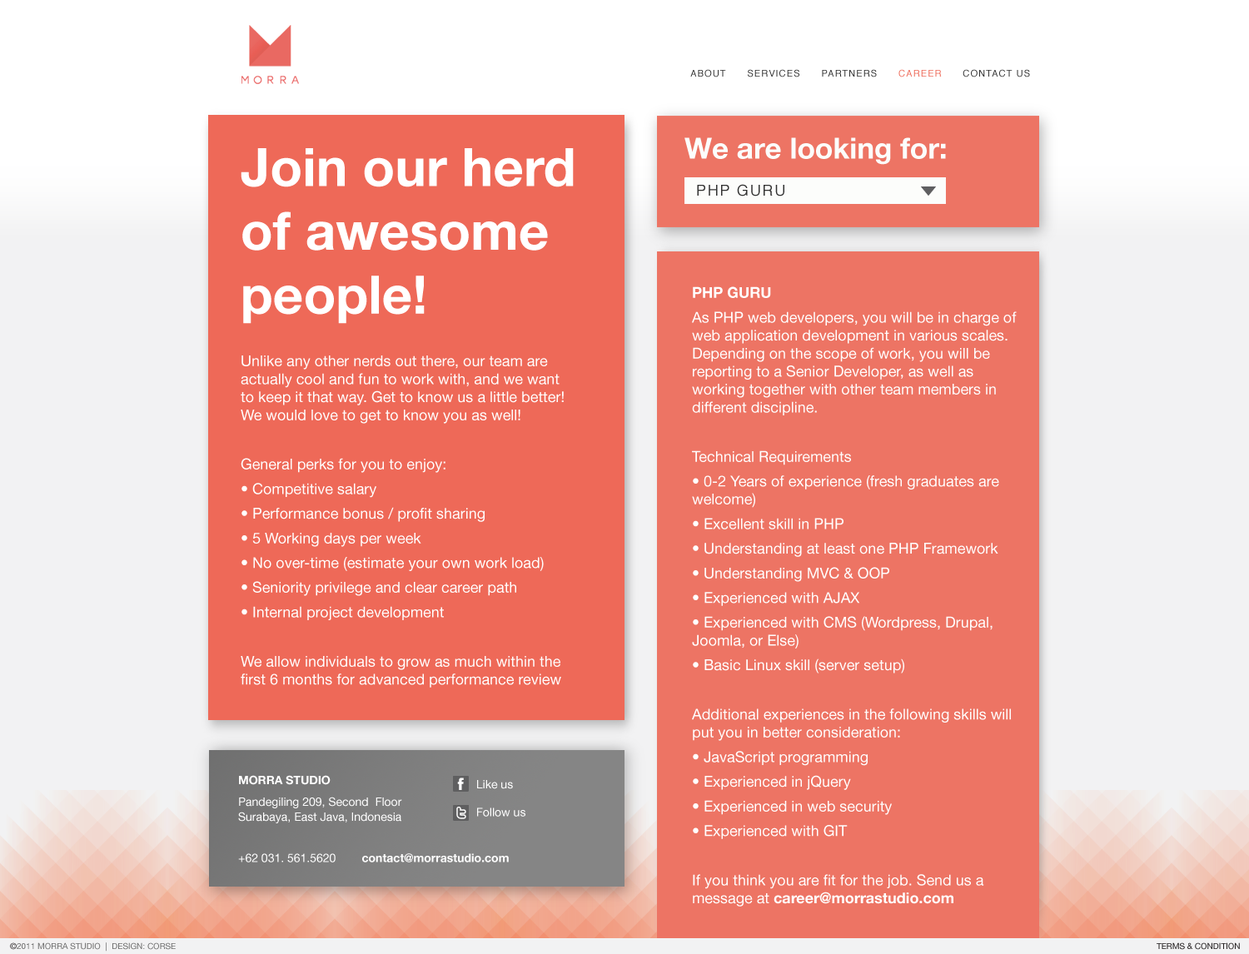
<style>
.page{position:relative;width:1249px;height:954px}
.page>*{position:absolute;margin:0}
.t1{font:9.2px "Helvetica";letter-spacing:0.1em;color:#303030}
.t2{font:9.2px "Helvetica";letter-spacing:0.1em;color:#ee6958}
.t3{font:29.2px "HelveticaNeue-Bold";color:#fcfdfb}
.t4{font:53.1px "HelveticaNeue-Bold";color:#ffffff}
.t5{font:15px "Helvetica";letter-spacing:0.1em;color:#303030}
.t6{font:15px "HelveticaNeue";color:#ffffff}
.t7{font:15px "HelveticaNeue-Bold";color:#ffffff}
.t8{font:11.7px/15px "HelveticaNeue";color:#ffffff}
.t9{font:11.7px "HelveticaNeue-Bold";color:#ffffff}
.t10{font:11.7px "HelveticaNeue";color:#ffffff}
.t11{font:8.3px "HelveticaNeue";color:#707070}
.t12{font:8.3px "HelveticaNeue";color:#231f20}
</style>
<div class="page">
<p class="t1" style="left:690px;top:69px;width:340px;height:8px">ABOUT      SERVICES      PARTNERS      <span class="t2">CAREER</span>      CONTACT US</p>
<p class="t3" style="left:685px;top:137px;width:261px;height:28px">We are looking for:</p>
<p class="t4" style="left:241px;top:148px;width:333px;height:176px">Join our herd of awesome people!</p>
<p class="t5" style="left:697px;top:184px;width:88px;height:13px">PHP GURU</p>
<p class="t6" style="left:692px;top:287px;width:325px;height:620px"><span class="t7">PHP GURU<br></span>As PHP web developers, you will be in charge of web application development in various scales. Depending on the scope of work, you will be reporting to a Senior Developer, as well as working together with other team members in different discipline.<br><br>Technical Requirements<br>• 0-2 Years of experience (fresh graduates are welcome)<br>• Excellent skill in PHP<br>• Understanding at least one PHP Framework<br>• Understanding MVC &amp; OOP<br>• Experienced with AJAX<br>• Experienced with CMS (Wordpress, Drupal, Joomla, or Else)<br>• Basic Linux skill (server setup)<br><br>Additional experiences in the following skills will put you in better consideration:<br>• JavaScript programming<br>• Experienced in jQuery<br>• Experienced in web security<br>• Experienced with GIT<br><br>If you think you are fit for the job. Send us a message at <span class="t7">career@morrastudio.com</span></p>
<p class="t6" style="left:241px;top:356px;width:323px;height:332px">Unlike any other nerds out there, our team are actually cool and fun to work with, and we want to keep it that way. Get to know us a little better! We would love to get to know you as well! <br><br>General perks for you to enjoy:<br>• Competitive salary<br>• Performance bonus / profit sharing<br>• 5 Working days per week<br>• No over-time (estimate your own work load)<br>• Seniority privilege and clear career path<br>• Internal project development<br><br>We allow individuals to grow as much within the first 6 months for advanced performance review</p>
<p class="t8" style="left:238px;top:775px;width:271px;height:88px"><span class="t9">MORRA STUDIO <br></span>Pandegiling 209, Second  Floor<br>Surabaya, East Java, Indonesia<br><span class="t10"><br>+62 031. 561.5620        </span><span class="t9">contact@morrastudio.com</span></p>
<p class="t10" style="left:477px;top:780px;width:49px;height:37px">Like us<br><br>Follow us</p>
<p class="t11" style="left:10px;top:943px;width:166px;height:9px"><span class="t12">©</span>2011 MORRA STUDIO  |  DESIGN: CORSE</p>
<p class="t12" style="left:1157px;top:943px;width:83px;height:7px">TERMS &amp; CONDITION</p>
</div>
